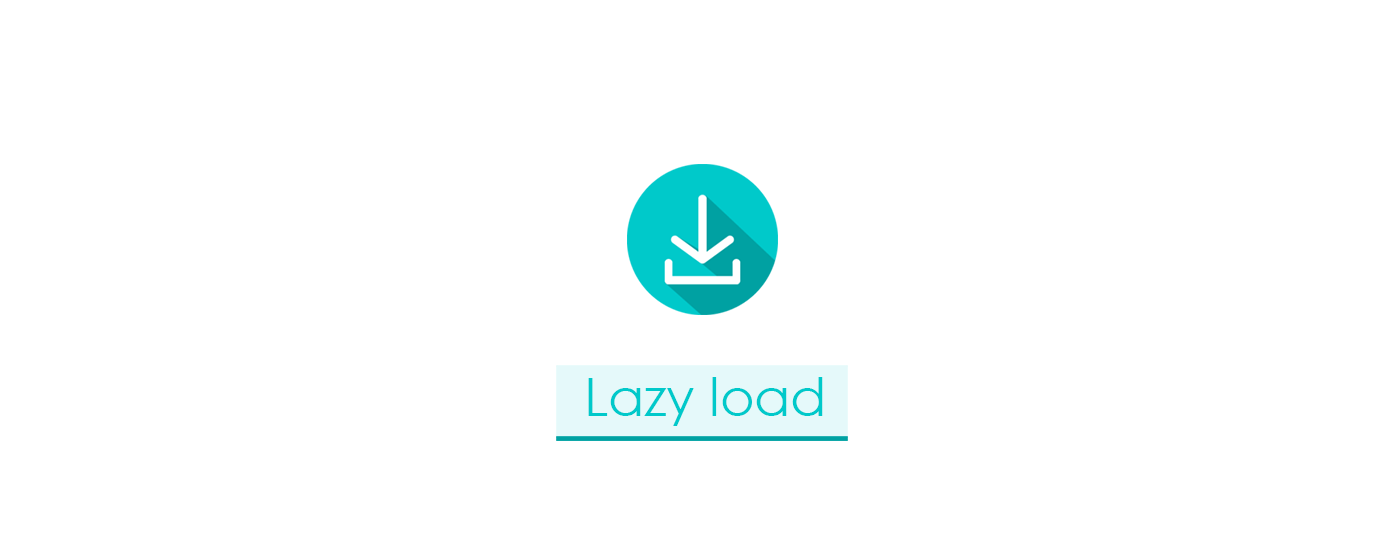
<style>
.page{position:relative;width:1400px;height:560px;background:#ffffff}
.page>*{position:absolute;margin:0}
.t1{font:52.5px "CenturyGothic";color:#00c9ca}
</style>
<div class="page">
<p class="t1" style="left:588px;top:377px;width:235px;height:49px">Lazy load</p>
</div>
